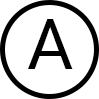
<style>
.page{position:relative;width:99px;height:99px;background:#ffffff}
.page>*{position:absolute;margin:0}
.t1{font:71px "Roboto-Regular";color:#000000}
</style>
<div class="page">
<p class="t1" style="left:28px;top:19px;width:45px;height:50px">A</p>
</div>
